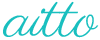
<style>
.page{position:relative;width:100px;height:40px;background:#ffffff}
.page>*{position:absolute;margin:0}
.t1{font:60px "Parisienne-Regular";color:#19bfbf}
</style>
<div class="page">
<p class="t1" style="left:3px;top:1px;width:96px;height:37px">aitto</p>
</div>
